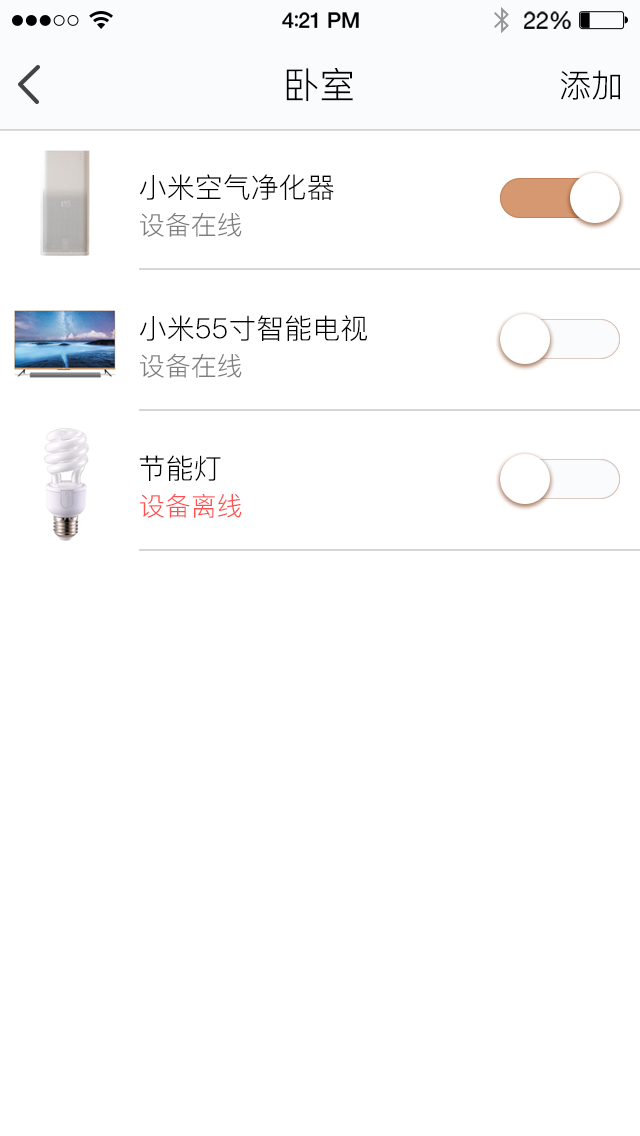
<style>
.page{position:relative;width:640px;height:1136px;background:#ffffff}
.page>*{position:absolute;margin:0}
.t1{font:36px "PingFang-SC-Regular";color:#000000}
.t2{font:32px "PingFang-SC-Regular";color:#000000}
.t3{font:28px "PingFang-SC-Regular";color:#000000}
.t4{font:26px "PingFang-SC-Regular";color:#7d7d7d}
.t5{font:26px "PingFang-SC-Regular";color:#ff5050}
</style>
<div class="page">
<p class="t1" style="left:286px;top:68px;width:67px;height:33px">卧室</p>
<p class="t2" style="left:560px;top:70px;width:60px;height:30px">添加</p>
<p class="t3" style="left:140px;top:174px;width:194px;height:26px">小米空气净化器</p>
<p class="t4" style="left:140px;top:212px;width:102px;height:25px">设备在线</p>
<p class="t3" style="left:140px;top:315px;width:227px;height:26px">小米55寸智能电视</p>
<p class="t4" style="left:140px;top:353px;width:102px;height:25px">设备在线</p>
<p class="t3" style="left:139px;top:455px;width:82px;height:26px">节能灯</p>
<p class="t5" style="left:140px;top:493px;width:102px;height:25px">设备离线</p>
</div>
